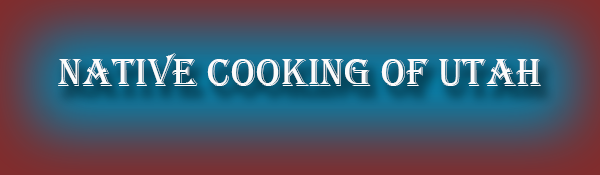
<style>
.page{position:relative;width:600px;height:175px}
.page>*{position:absolute;margin:0}
.t1{font:40px "Algerian";color:#fcfbfb}
</style>
<div class="page">
<p class="t1" style="left:58px;top:53px;width:483px;height:33px">Native Cooking of Utah</p>
</div>
